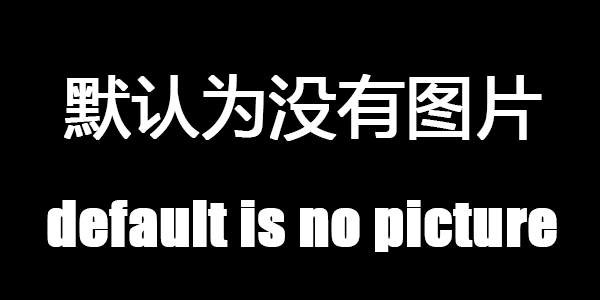
<style>
.page{position:relative;width:600px;height:300px;background:#000000}
.page>*{position:absolute;margin:0}
.t1{font:66.7px "MicrosoftYaHei";color:#ffffff;font-weight:bold}
.t2{font:58.3px "Impact";color:#ffffff;font-weight:bold}
</style>
<div class="page">
<p class="t1" style="left:64px;top:74px;width:478px;height:67px">默认为没有图片</p>
<p class="t2" style="left:47px;top:200px;width:510px;height:52px">default is no picture</p>
</div>
